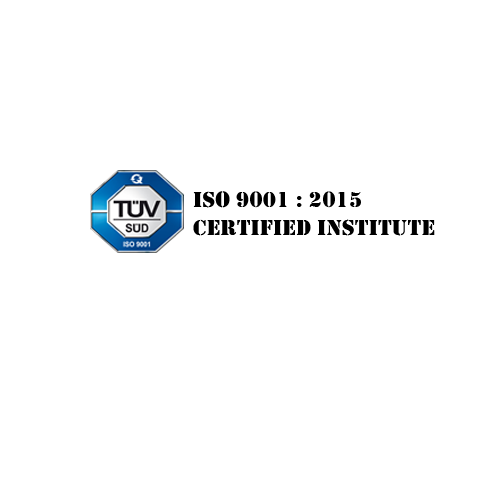
<style>
.page{position:relative;width:495px;height:496px;background:#ffffff}
.page>*{position:absolute;margin:0}
.t1{font:23.3px "Stencil";color:#000000}
</style>
<div class="page">
<p class="t1" style="left:193px;top:191px;width:242px;height:45px">ISO 9001 : 2015 <br>Certified Institute</p>
</div>
